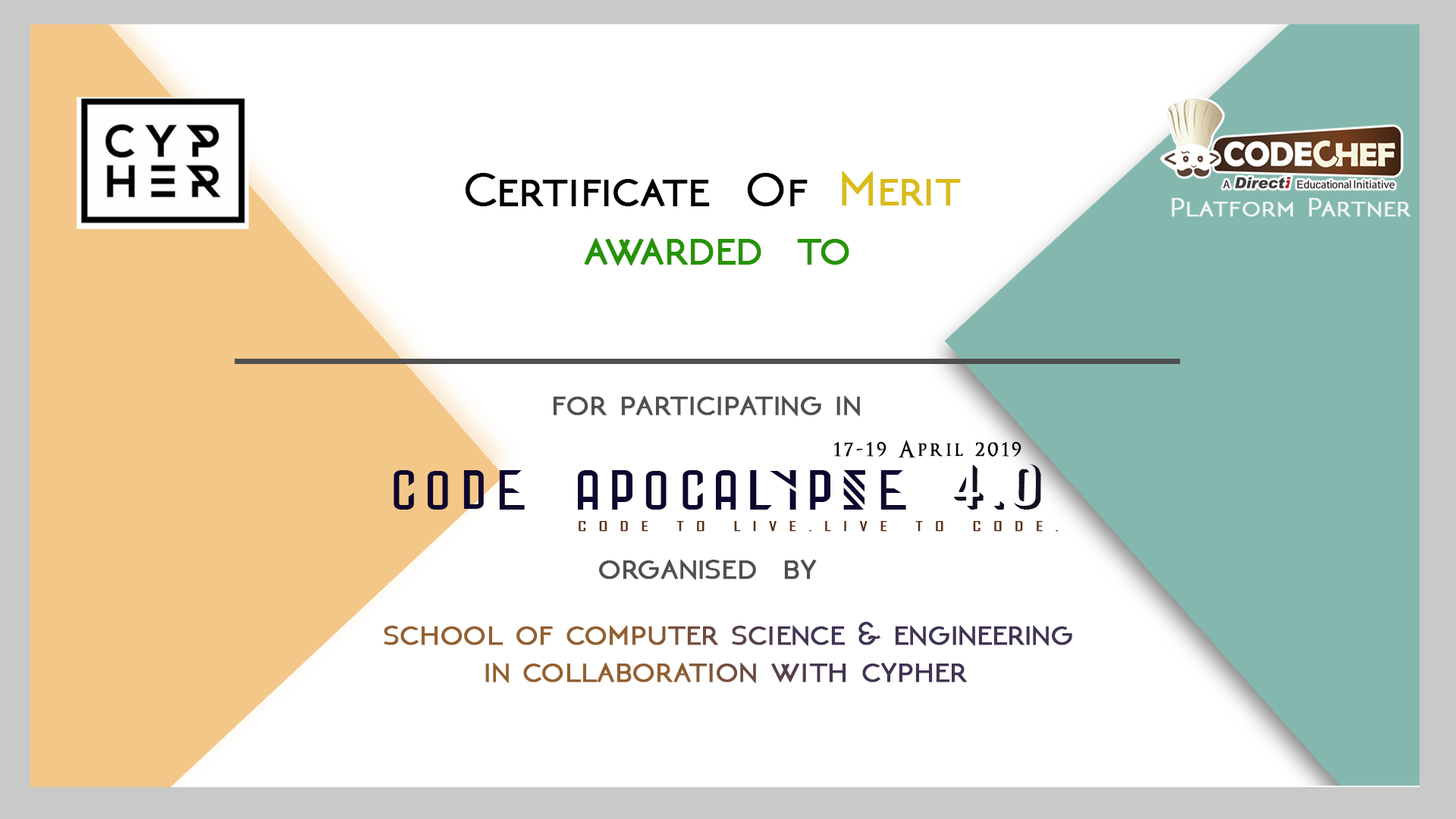
<style>
.page{position:relative;width:1456px;height:819px;background:#ffffff}
.page>*{position:absolute;margin:0}
.t1{font:49.5px "NEOTERIC-Bold";color:#000000;font-weight:bold;scale:1.04 1}
.t2{font:49.3px "NEOTERIC-Bold";color:#d9bb18;font-weight:bold;scale:1.04 1}
.t3{font:27.1px "NEOTERIC-Bold";letter-spacing:0.02em;color:#ffffff;font-weight:bold;scale:1.12 1}
.t4{font:47.2px "NEOTERIC-Bold";color:#279306;font-weight:bold;scale:1.04 1}
.t5{font:47.2px "Arial-BoldMT";color:#504f4f;font-weight:bold;scale:1.04 1}
.t6{font:34.8px "NEOTERIC-Bold";color:#504f4f;font-weight:bold;scale:1.04 1}
.t7{font:22.6px "OptimusPrinceps";letter-spacing:0.12em;color:#000000;font-weight:bold}
.t8{font:56.3px "StoneWalls";letter-spacing:0.12em;color:#0f062f;scale:1.17 1}
.t9{font:56.3px "StoneWalls";letter-spacing:-0.12em;color:#0f062f;scale:1.17 1}
.t10{font:56.3px "Archer";letter-spacing:0.12em;color:#121122;scale:1.17 1}
.t11{font:13.1px "AgencyFB-Reg";letter-spacing:0.56em;color:#5c2f13;font-weight:bold;scale:1.58 1}
.t12{font:34.8px/37.3px "NEOTERIC-Bold";font-weight:bold;scale:1.04 1}
</style>
<div class="page">
<p class="t1" style="left:465px;top:173px;width:343px;height:33px">Certificate  Of</p>
<p class="t2" style="left:842px;top:171px;width:119px;height:35px">Merit</p>
<p class="t3" style="left:1172px;top:198px;width:239px;height:20px;opacity:0.83">Platform Partner</p>
<p class="t4" style="left:584px;top:238px;width:265px;height:27px">awarded  to</p>
<p class="t5" style="left:234px;top:359px;width:947px;height:5px">_________________________________</p>
<p class="t6" style="left:553px;top:396px;width:307px;height:20px">for participating in</p>
<p class="t7" style="left:833px;top:440px;width:188px;height:18px">17-19 April 2019</p>
<p class="t8" style="left:394px;top:464px;width:647px;height:46px">CODE APOCA<span class="t9">L</span>YPSE <span class="t10">4.0</span></p>
<p class="t11" style="left:579px;top:521px;width:479px;height:11px">CODE TO LIVE.LIVE TO CODE.</p>
<p class="t6" style="left:599px;top:560px;width:218px;height:20px">organised  by</p>
<p class="t12" style="left:384px;top:622px;width:688px;height:61px">school of computer science &amp; engineering <br>        in collaboration with cypher</p>
</div>
